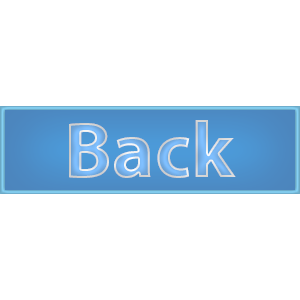
<style>
.page{position:relative;width:300px;height:300px;background:#ffffff}
.page>*{position:absolute;margin:0}
.t1{font:80px "MyriadPro-Bold"}
</style>
<div class="page">
<p class="t1" style="left:69px;top:120px;width:167px;height:58px">Back</p>
</div>
